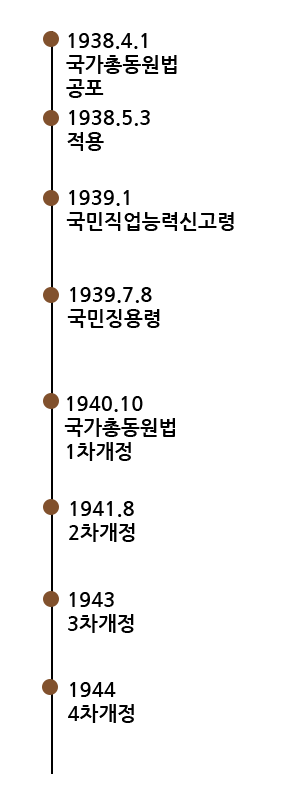
<style>
.page{position:relative;width:300px;height:800px;background:#ffffff}
.page>*{position:absolute;margin:0}
.t1{font:20px "NanumGothicBold";color:#000000}
</style>
<div class="page">
<p class="t1" style="left:66px;top:33px;width:111px;height:65px">1938.4.1<br>국가총동원법<br>공포</p>
<p class="t1" style="left:67px;top:110px;width:83px;height:41px">1938.5.3<br>적용</p>
<p class="t1" style="left:66px;top:190px;width:168px;height:41px">1939.1<br>국민직업능력신고령</p>
<p class="t1" style="left:67px;top:287px;width:93px;height:41px">1939.7.8<br>국민징용령</p>
<p class="t1" style="left:64px;top:396px;width:111px;height:65px">1940.10<br>국가총동원법<br>1차개정</p>
<p class="t1" style="left:69px;top:501px;width:66px;height:41px">1941.8<br>2차개정</p>
<p class="t1" style="left:68px;top:592px;width:66px;height:41px">1943<br>3차개정</p>
<p class="t1" style="left:68px;top:682px;width:66px;height:41px">1944<br>4차개정</p>
</div>
